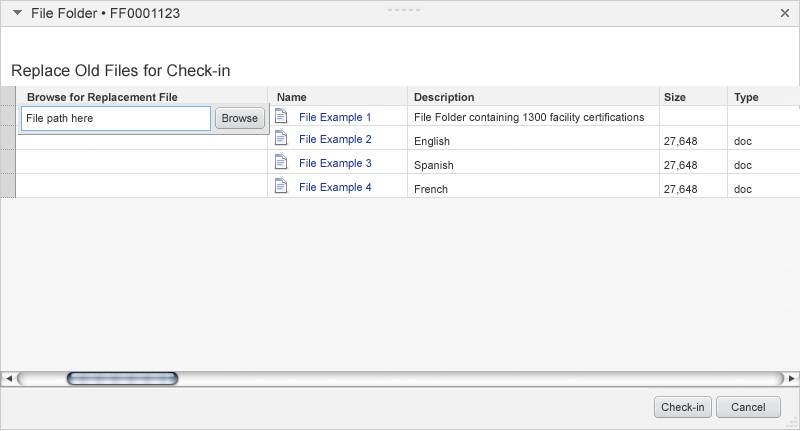
<style>
.page{position:relative;width:800px;height:431px;background:#ffffff}
.page>*{position:absolute;margin:0}
.t1{font:14px "ArialMT";color:#333333}
.t2{font:16px "ArialMT";letter-spacing:0.005em;color:#333333}
.t3{font:11px "Arial-BoldMT";color:#333333}
.t4{font:11px/20px "ArialMT";color:#333333}
.t5{font:11px/20px "Arial-BoldMT";color:#333333}
.t6{font:11px/24px "ArialMT";color:#333333}
.t7{font:11px "ArialMT";color:#1f3695}
.t8{font:11px "ArialMT";color:#333333}
.t9{font:11px/24px "ArialMT";color:#1f3695}
.t10{font:11px/20px "ArialMT";color:#1f3695}
</style>
<div class="page">
<p class="t1" style="left:32px;top:8px;width:148px;height:10px">File Folder • FF0001123</p>
<p class="t2" style="left:12px;top:64px;width:218px;height:16px">Replace Old Files for Check-in</p>
<p class="t3" style="left:27px;top:93px;width:151px;height:11px">Browse for Replacement File</p>
<p class="t3" style="left:277px;top:93px;width:30px;height:8px">Name</p>
<p class="t4" style="left:414px;top:93px;width:230px;height:100px"><span class="t5">Description<br></span>File Folder containing 1300 facility certifications<br><span class="t6">English <br>Spanish<br>French</span></p>
<p class="t6" style="left:664px;top:93px;width:33px;height:102px"><span class="t5">Size<br><br></span>27,648 <br>27,648<br>27,648</p>
<p class="t6" style="left:734px;top:93px;width:25px;height:100px"><span class="t5">Type<br><br></span>doc <br>doc<br>doc</p>
<p class="t7" style="left:300px;top:113px;width:70px;height:11px"><span class="t3"><br></span>File Example 1</p>
<p class="t8" style="left:27px;top:114px;width:66px;height:11px">File path here</p>
<p class="t8" style="left:222px;top:114px;width:36px;height:8px">Browse</p>
<p class="t9" style="left:300px;top:135px;width:72px;height:59px"><span class="t10">File Example 2<br></span>File Example 3<br>File Example 4</p>
<p class="t8" style="left:661px;top:403px;width:43px;height:8px">Check-in</p>
<p class="t8" style="left:731px;top:403px;width:34px;height:8px">Cancel</p>
</div>
